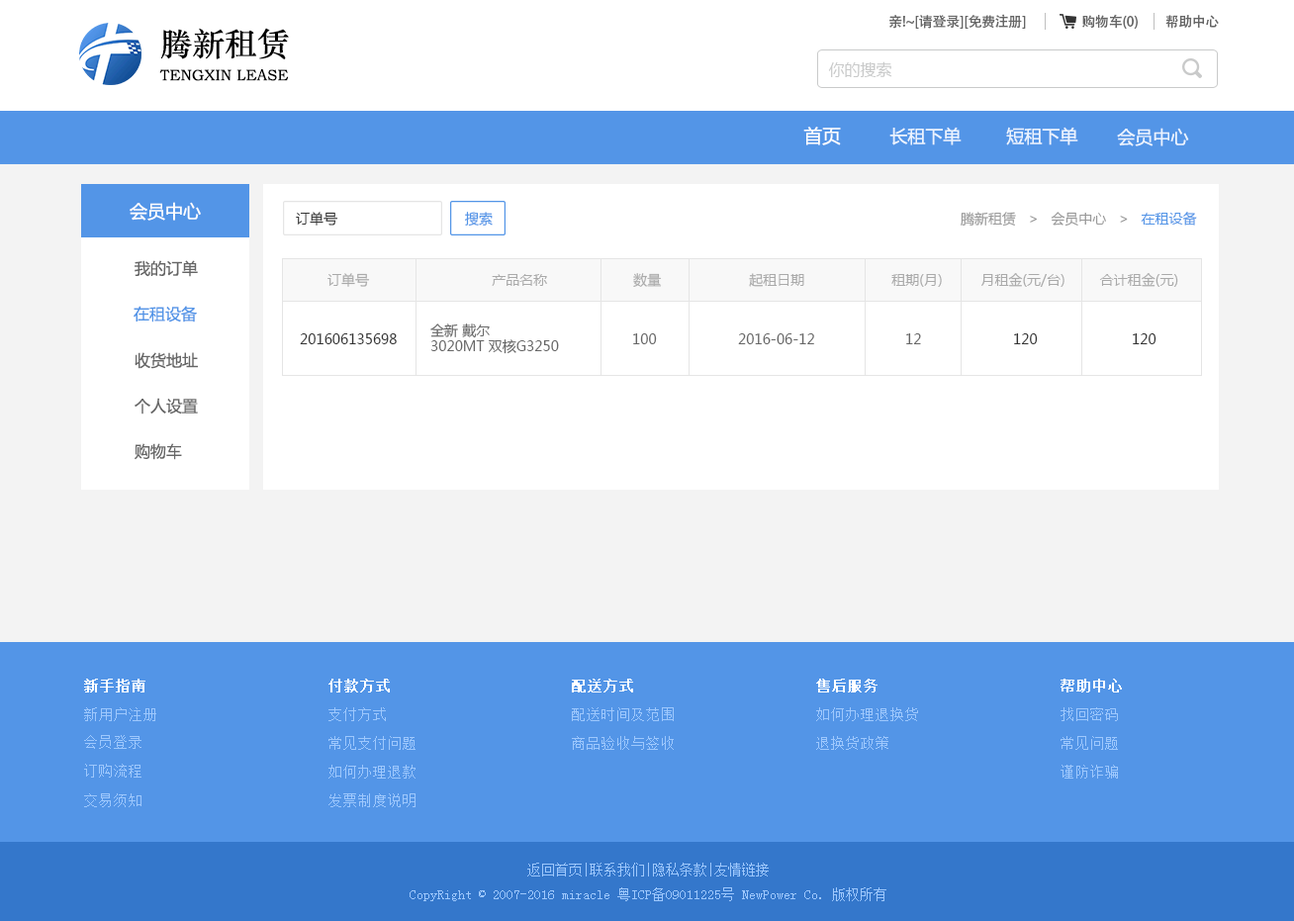
<style>
.page{position:relative;width:1294px;height:921px;background:#ffffff}
.page>*{position:absolute;margin:0}
.t1{font:13.9px "AdobeHeitiStd-Regular";letter-spacing:-0.02em;color:#666666}
.t2{font:32.3px "STZhongsong";color:#000000}
.t3{font:15.8px "MicrosoftYaHei";color:#c9caca}
.t4{font:15.3px "STZhongsong";color:#000000}
.t5{font:18.6px "MicrosoftYaHei";color:#ffffff}
.t6{font:17.8px "MicrosoftYaHei";color:#eaf3ff}
.t7{font:17.8px "MicrosoftYaHei";color:#fefefe}
.t8{font:13.9px "MicrosoftYaHei";color:#333333}
.t9{font:13.9px "MicrosoftYaHei";color:#5395e7}
.t10{font:13.9px "MicrosoftYaHei";color:#999999}
.t11{font:15.8px "MicrosoftYaHei";color:#666666}
.t12{font:13.9px "MicrosoftYaHei";color:#aaaaaa}
.t13{font:15.8px "MicrosoftYaHei";color:#5395e7}
.t14{font:13.9px/15.8px "MicrosoftYaHei";color:#666666}
.t15{font:13.9px "MicrosoftYaHei";color:#666666}
.t16{font:14.8px "SimSun";color:#ffffff;font-weight:bold}
.t17{font:14.8px "SimSun";color:#9ec8fd}
.t18{font:13.9px "SimSun";color:#9ec8fd}
</style>
<div class="page">
<p class="t1" style="left:890px;top:14px;width:136px;height:15px">亲!~[请登录][免费注册]</p>
<p class="t1" style="left:1083px;top:14px;width:55px;height:15px">购物车(0)</p>
<p class="t1" style="left:1166px;top:15px;width:53px;height:14px">帮助中心</p>
<p class="t2" style="left:160px;top:28px;width:129px;height:31px">腾新租赁</p>
<p class="t3" style="left:828px;top:61px;width:65px;height:16px">你的搜索</p>
<p class="t4" style="left:159px;top:69px;width:130px;height:12px">TENGXIN LEASE</p>
<p class="t5" style="left:804px;top:127px;width:37px;height:18px">首页</p>
<p class="t6" style="left:890px;top:127px;width:72px;height:18px">长租下单</p>
<p class="t6" style="left:1006px;top:127px;width:73px;height:18px">短租下单</p>
<p class="t6" style="left:1117px;top:128px;width:72px;height:18px">会员中心</p>
<p class="t7" style="left:130px;top:202px;width:71px;height:19px">会员中心</p>
<p class="t8" style="left:296px;top:212px;width:42px;height:14px">订单号</p>
<p class="t9" style="left:465px;top:212px;width:28px;height:15px">搜索</p>
<p class="t10" style="left:961px;top:212px;width:236px;height:15px">腾新租赁   &gt;   会员中心   &gt;   <span class="t9">在租设备</span></p>
<p class="t11" style="left:135px;top:260px;width:63px;height:17px">我的订单</p>
<p class="t12" style="left:328px;top:273px;width:851px;height:14px">订单号                              产品名称                     数量                 起租日期                 租期(月)    月租金(元/台)       合计租金(元)</p>
<p class="t13" style="left:134px;top:306px;width:63px;height:17px">在租设备</p>
<p class="t14" style="left:430px;top:324px;width:129px;height:30px">全新 戴尔 <br>3020MT 双核G3250</p>
<p class="t8" style="left:300px;top:333px;width:97px;height:11px">201606135698</p>
<p class="t15" style="left:633px;top:333px;width:24px;height:11px">100</p>
<p class="t15" style="left:738px;top:333px;width:76px;height:11px">2016-06-12</p>
<p class="t15" style="left:906px;top:333px;width:15px;height:11px">12</p>
<p class="t8" style="left:1014px;top:333px;width:24px;height:11px">120</p>
<p class="t8" style="left:1133px;top:333px;width:24px;height:11px">120</p>
<p class="t11" style="left:135px;top:352px;width:63px;height:17px">收货地址</p>
<p class="t11" style="left:135px;top:398px;width:63px;height:17px">个人设置</p>
<p class="t11" style="left:135px;top:443px;width:47px;height:17px">购物车</p>
<p class="t16" style="left:84px;top:679px;width:61px;height:14px">新手指南</p>
<p class="t16" style="left:329px;top:679px;width:61px;height:14px">付款方式</p>
<p class="t16" style="left:572px;top:679px;width:61px;height:14px">配送方式</p>
<p class="t16" style="left:816px;top:679px;width:62px;height:14px">售后服务</p>
<p class="t16" style="left:1061px;top:679px;width:61px;height:14px">帮助中心</p>
<p class="t17" style="left:84px;top:708px;width:72px;height:13px">新用户注册</p>
<p class="t17" style="left:329px;top:708px;width:57px;height:13px">支付方式</p>
<p class="t17" style="left:572px;top:708px;width:102px;height:13px">配送时间及范围</p>
<p class="t17" style="left:816px;top:708px;width:102px;height:13px">如何办理退换货</p>
<p class="t17" style="left:1061px;top:708px;width:57px;height:13px">找回密码</p>
<p class="t17" style="left:84px;top:735px;width:58px;height:14px">会员登录</p>
<p class="t17" style="left:329px;top:736px;width:87px;height:14px">常见支付问题</p>
<p class="t17" style="left:572px;top:736px;width:102px;height:14px">商品验收与签收</p>
<p class="t17" style="left:816px;top:736px;width:73px;height:14px">退换货政策</p>
<p class="t17" style="left:1061px;top:736px;width:57px;height:14px">常见问题</p>
<p class="t17" style="left:84px;top:764px;width:58px;height:14px">订购流程</p>
<p class="t17" style="left:329px;top:765px;width:87px;height:14px">如何办理退款</p>
<p class="t17" style="left:1061px;top:765px;width:57px;height:14px">谨防诈骗</p>
<p class="t17" style="left:84px;top:794px;width:58px;height:13px">交易须知</p>
<p class="t17" style="left:329px;top:794px;width:87px;height:13px">发票制度说明</p>
<p class="t18" style="left:410px;top:863px;width:477px;height:38px;text-align:center">返回首页|联系我们|隐私条款|友情链接<br>CopyRight © 2007-2016 miracle 粤ICP备09011225号 NewPower Co. 版权所有</p>
</div>
